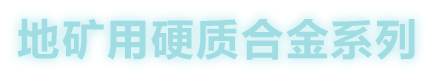
<style>
.page{position:relative;width:441px;height:81px;background:#ffffff}
.page>*{position:absolute;margin:0}
.t1{font:44.8px "FZLTCHJW--GB1-0";color:#a0dde3;text-transform:uppercase}
</style>
<div class="page">
<p class="t1" style="left:17px;top:18px;width:398px;height:42px">地矿用硬质合金系列</p>
</div>
